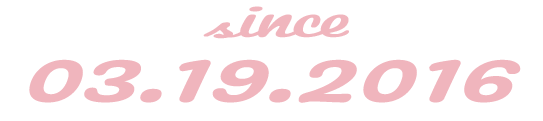
<style>
.page{position:relative;width:543px;height:121px;background:#ffffff}
.page>*{position:absolute;margin:0}
.t1{font:48px "Pacifico-Regular";color:#f0b5bd;font-style:italic;scale:1.52 1}
.t2{font:72px "Pacifico-Regular";color:#f0b5bd;font-style:italic;scale:1.52 1}
</style>
<div class="page">
<p class="t1" style="left:203px;top:6px;width:146px;height:33px">since</p>
<p class="t2" style="left:29px;top:59px;width:492px;height:44px">03.19.2016</p>
</div>
